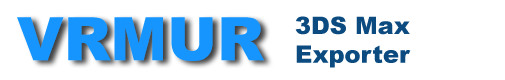
<style>
.page{position:relative;width:505px;height:80px;background:#ffffff}
.page>*{position:absolute;margin:0}
.t1{font:60px "Arial-Black";color:#1695ff}
.t2{font:24px "Arial-Black";color:#0b4b80}
</style>
<div class="page">
<p class="t1" style="left:17px;top:17px;width:247px;height:44px">VRMUR</p>
<p class="t2" style="left:295px;top:16px;width:116px;height:52px;text-align:center">3DS Max<br>Exporter</p>
</div>
